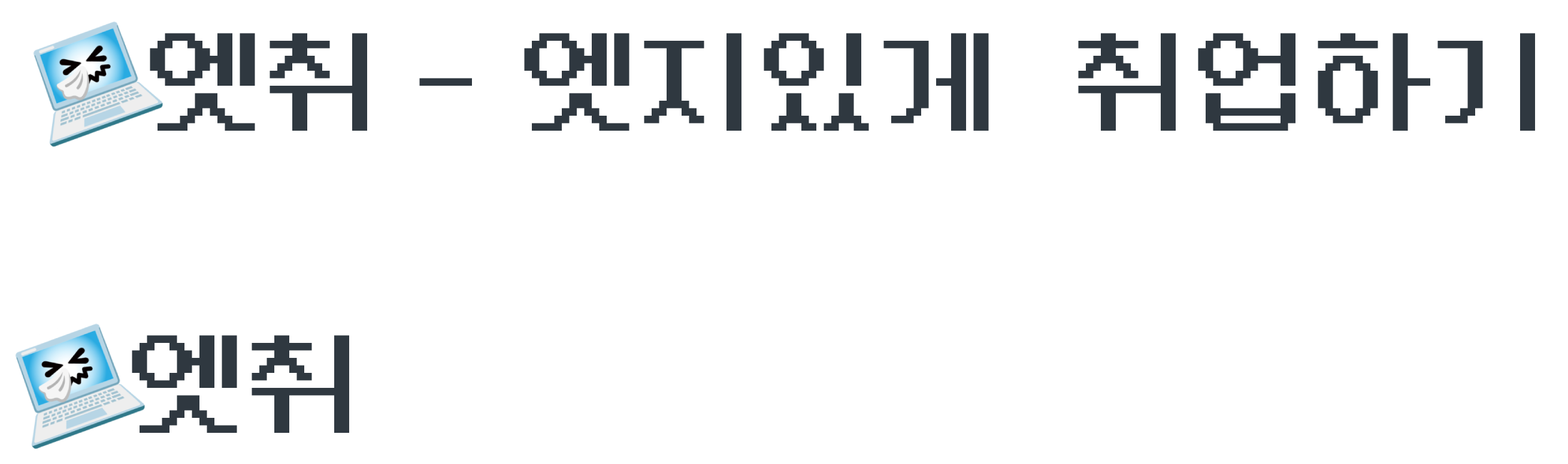
<style>
.page{position:relative;width:1568px;height:464px;background:#ffffff}
.page>*{position:absolute;margin:0}
.t1{font:119.8px "NeoDunggeunmoPro-Regular";color:#2f3840}
</style>
<div class="page">
<p class="t1" style="left:150px;top:33px;width:1385px;height:98px">엣취 - 엣지있게  취업하기</p>
<p class="t1" style="left:132px;top:335px;width:217px;height:97px">엣취</p>
</div>
